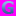
<style>
.page{position:relative;width:16px;height:16px;background:#ff00ff}
.page>*{position:absolute;margin:0}
.t1{font:18px "Tahoma-Bold";color:#8fb9df}
</style>
<div class="page">
<p class="t1" style="left:1px;top:1px;width:13px;height:13px">G</p>
</div>
